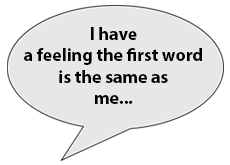
<style>
.page{position:relative;width:230px;height:165px;background:#e7e7e7}
.page>*{position:absolute;margin:0}
.t1{font:18px "MyriadPro-Bold";color:#000000}
</style>
<div class="page">
<p class="t1" style="left:24px;top:27px;width:178px;height:77px;text-align:center">I have a feeling the first word<br>is the same as <br>me...</p>
</div>
